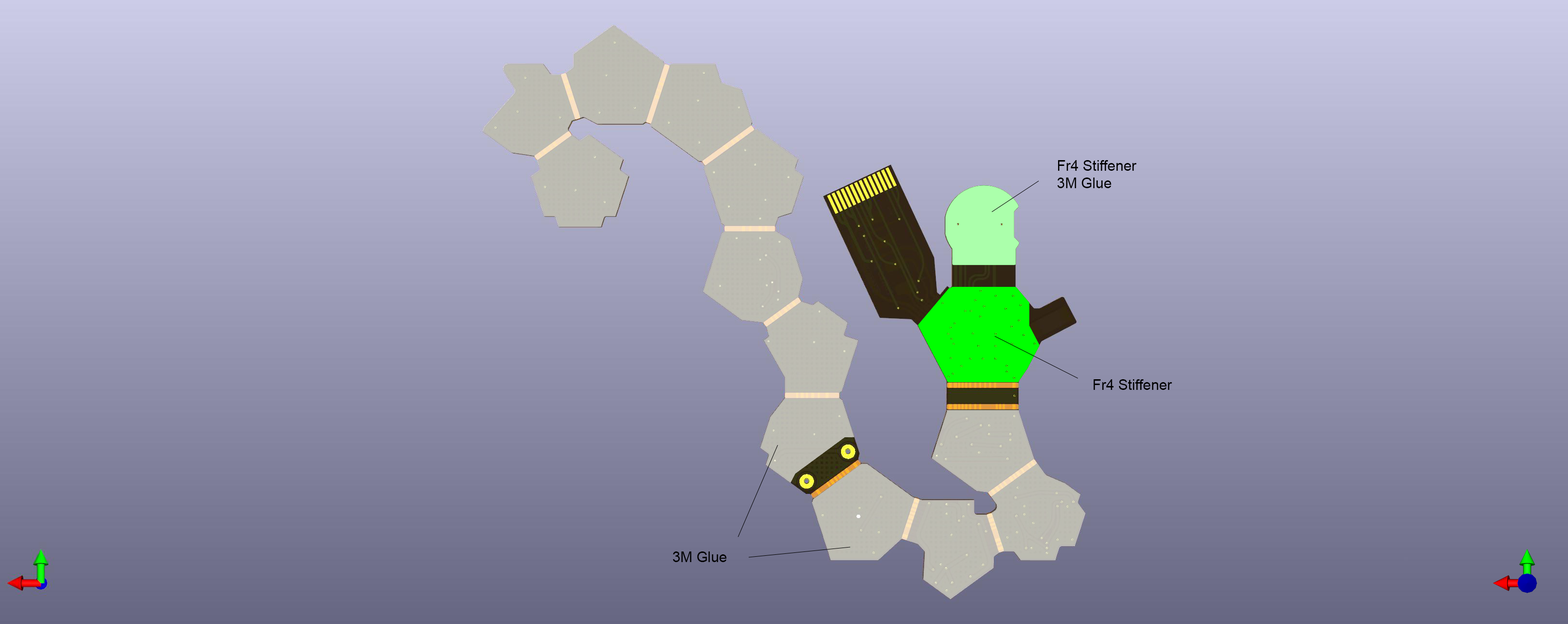
<style>
.page{position:relative;width:1568px;height:624px}
.page>*{position:absolute;margin:0}
.t1{font:14.5px "ArialMT";color:#000000}
</style>
<div class="page">
<p class="t1" style="left:1057px;top:160px;width:80px;height:28px">Fr4 Stiffener<br>3M Glue</p>
<p class="t1" style="left:1093px;top:379px;width:79px;height:11px">Fr4 Stiffener</p>
<p class="t1" style="left:673px;top:551px;width:53px;height:11px">3M Glue</p>
</div>
